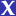
<style>
.page{position:relative;width:16px;height:16px;background:#3333aa}
.page>*{position:absolute;margin:0}
.t1{font:20.4px "BookAntiqua-Bold";letter-spacing:0.02em;color:#ffffff}
</style>
<div class="page">
<p class="t1" style="left:1px;top:0px;width:14px;height:15px">X</p>
</div>
